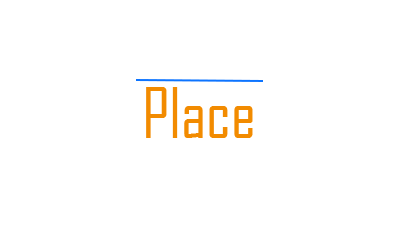
<style>
.page{position:relative;width:400px;height:225px;background:#ffffff}
.page>*{position:absolute;margin:0}
.t1{font:66.7px "AgencyFB-Reg";color:#f28b00}
</style>
<div class="page">
<p class="t1" style="left:146px;top:87px;width:107px;height:51px">Place</p>
</div>
